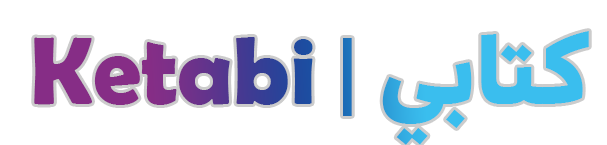
<style>
.page{position:relative;width:607px;height:145px;background:#ffffff}
.page>*{position:absolute;margin:0}
.t1{font:96px "BerlinSansFBDemi-Bold"}
.t2{font:96px "TextaAlt-Bold"}
.t3{font:96px "DiodrumArabic-Bold"}
</style>
<div class="page">
<p class="t1" style="left:34px;top:31px;width:555px;height:114px">Ketabi <span class="t2">| </span><span class="t3">كتابي</span></p>
</div>
